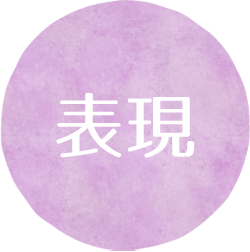
<style>
.page{position:relative;width:250px;height:252px;background:#ffffff}
.page>*{position:absolute;margin:0}
.t1{font:72px "07LogoTypeGothic7";color:#ffffff}
</style>
<div class="page">
<p class="t1" style="left:56px;top:93px;width:139px;height:65px">表現</p>
</div>
